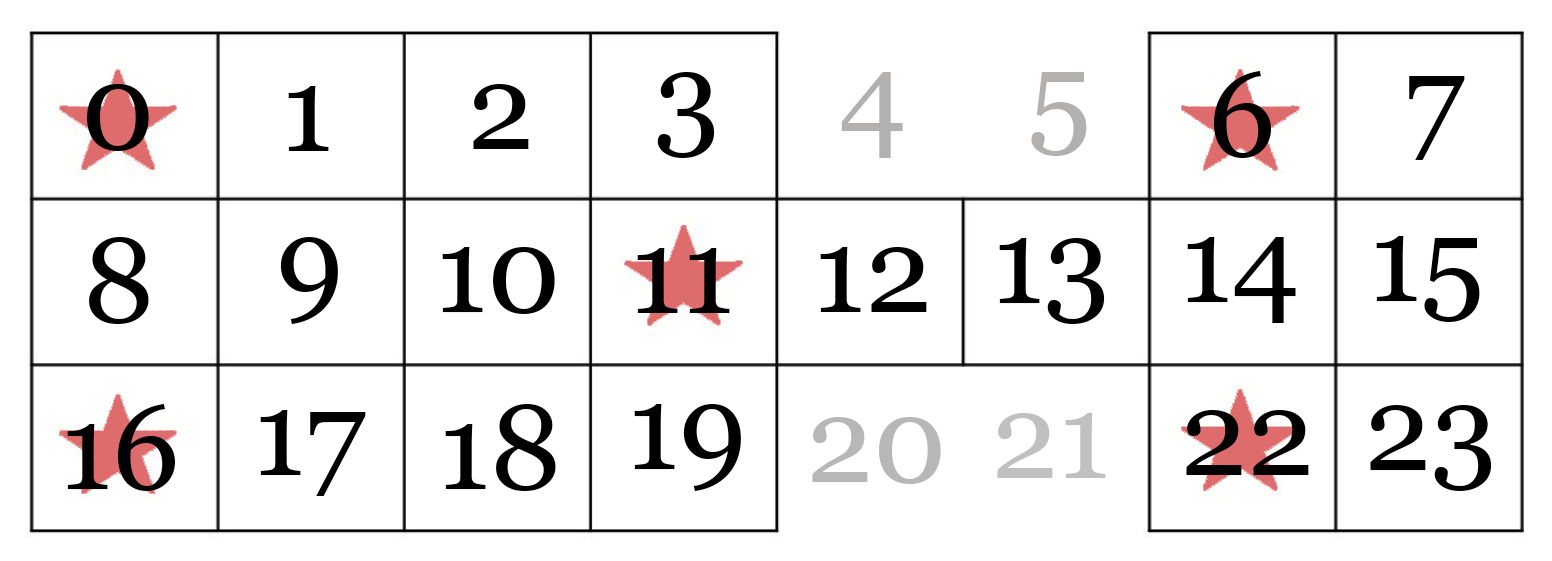
<style>
.page{position:relative;width:1552px;height:561px;background:#ffffff}
.page>*{position:absolute;margin:0}
.t1{font:120px "Georgia";color:#000000}
.t2{font:120px "Georgia";color:#b3b0b0}
.t3{font:120px "Georgia";color:#c0c0c0}
.t4{font:120px "Georgia";color:#b7b7b7}
</style>
<div class="page">
<p class="t1" style="left:657px;top:72px;width:58px;height:86px">3</p>
<p class="t2" style="left:841px;top:72px;width:62px;height:86px">4</p>
<p class="t2" style="left:1031px;top:72px;width:56px;height:84px">5</p>
<p class="t1" style="left:1214px;top:71px;width:57px;height:87px">6</p>
<p class="t1" style="left:1409px;top:76px;width:56px;height:84px">7</p>
<p class="t1" style="left:87px;top:84px;width:62px;height:67px">0</p>
<p class="t1" style="left:288px;top:86px;width:41px;height:65px">1</p>
<p class="t1" style="left:473px;top:84px;width:56px;height:65px">2</p>
<p class="t1" style="left:89px;top:237px;width:60px;height:87px">8</p>
<p class="t1" style="left:280px;top:237px;width:58px;height:87px">9</p>
<p class="t1" style="left:999px;top:238px;width:106px;height:86px">13</p>
<p class="t1" style="left:1187px;top:237px;width:109px;height:86px">14</p>
<p class="t1" style="left:1376px;top:236px;width:104px;height:86px">15</p>
<p class="t1" style="left:442px;top:247px;width:113px;height:67px">10</p>
<p class="t1" style="left:637px;top:248px;width:93px;height:65px">11</p>
<p class="t1" style="left:820px;top:247px;width:107px;height:65px">12</p>
<p class="t1" style="left:67px;top:404px;width:108px;height:87px">16</p>
<p class="t1" style="left:260px;top:410px;width:106px;height:86px">17</p>
<p class="t1" style="left:445px;top:404px;width:111px;height:87px">18</p>
<p class="t1" style="left:634px;top:404px;width:107px;height:87px">19</p>
<p class="t3" style="left:997px;top:413px;width:109px;height:65px">21</p>
<p class="t1" style="left:1186px;top:410px;width:123px;height:65px">22</p>
<p class="t1" style="left:1370px;top:405px;width:122px;height:86px">23</p>
<p class="t4" style="left:812px;top:417px;width:129px;height:67px">20</p>
</div>
